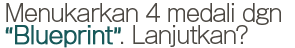
<style>
.page{position:relative;width:295px;height:48px;background:#ffffff}
.page>*{position:absolute;margin:0}
.t1{font:23px/22px "GothicMB101Pro-Light";letter-spacing:-0.04em;color:#4d4944}
.t2{font:23px/22px "AdobeClean-Regular";letter-spacing:-0.04em;color:#18595a;font-weight:bold}
.t3{font:23px/22px "GothicMB101Pro-Light";letter-spacing:-0.04em;color:#18595a;font-weight:bold}
</style>
<div class="page">
<p class="t1" style="left:5px;top:3px;width:276px;height:45px">Menukarkan 4 medali dgn<br><span class="t2">“</span><span class="t3">Blueprint</span><span class="t2">”</span>. Lanjutkan?</p>
</div>
